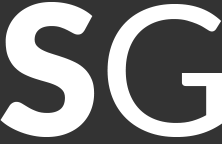
<style>
.page{position:relative;width:222px;height:144px;background:#333333}
.page>*{position:absolute;margin:0}
.t1{font:183px "Lato-Black";color:#ffffff}
.t2{font:183px "Lato-Regular";color:#ffffff}
</style>
<div class="page">
<p class="t1" style="left:0px;top:2px;width:223px;height:135px">S<span class="t2">G</span></p>
</div>
